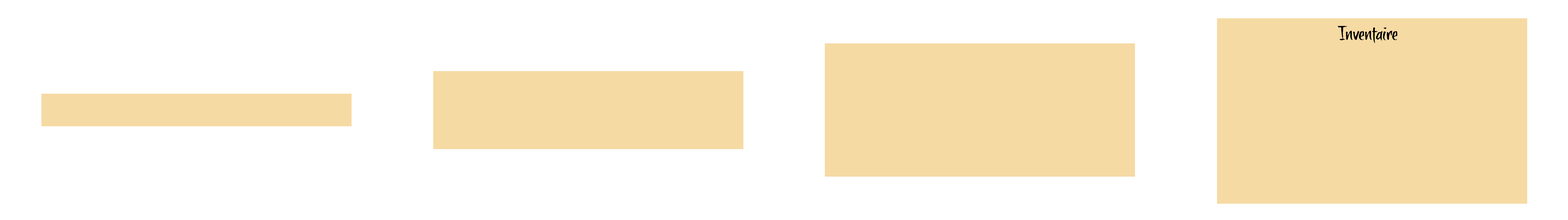
<style>
.page{position:relative;width:1568px;height:220px;background:#ffffff}
.page>*{position:absolute;margin:0}
.t1{font:18.2px "brushtipTexeTRIAL";color:#000000;scale:1.11 1}
</style>
<div class="page">
<p class="t1" style="left:1337px;top:26px;width:61px;height:17px">Inventaire</p>
</div>
